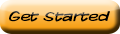
<style>
.page{position:relative;width:120px;height:34px}
.page>*{position:absolute;margin:0}
.t1{font:14px "KomikaDisplay";color:#000000;scale:1.2 1}
</style>
<div class="page">
<p class="t1" style="left:9px;top:11px;width:101px;height:11px">Get Started</p>
</div>
